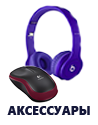
<style>
.page{position:relative;width:98px;height:125px;background:#ffffff}
.page>*{position:absolute;margin:0}
.t1{font:12px "SegoeUIBlack";color:#141738}
</style>
<div class="page">
<p class="t1" style="left:7px;top:106px;width:83px;height:9px">АКСЕССУАРЫ</p>
</div>
